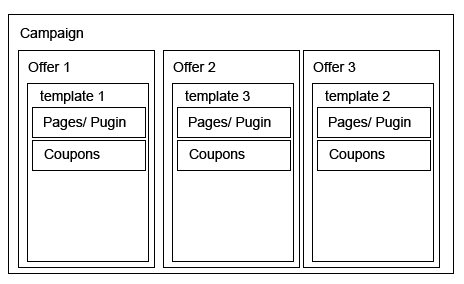
<style>
.page{position:relative;width:464px;height:284px;background:#ffffff}
.page>*{position:absolute;margin:0}
.t1{font:14px "ArialMT";color:#000000}
</style>
<div class="page">
<p class="t1" style="left:20px;top:28px;width:63px;height:13px">Campaign</p>
<p class="t1" style="left:28px;top:62px;width:41px;height:10px">Offer 1</p>
<p class="t1" style="left:173px;top:62px;width:43px;height:10px">Offer 2</p>
<p class="t1" style="left:313px;top:62px;width:43px;height:10px">Offer 3</p>
<p class="t1" style="left:40px;top:90px;width:63px;height:14px">template 1</p>
<p class="t1" style="left:185px;top:90px;width:65px;height:14px">template 3</p>
<p class="t1" style="left:325px;top:90px;width:65px;height:14px">template 2</p>
<p class="t1" style="left:44px;top:117px;width:82px;height:13px">Pages/ Pugin</p>
<p class="t1" style="left:189px;top:117px;width:82px;height:13px">Pages/ Pugin</p>
<p class="t1" style="left:329px;top:117px;width:82px;height:13px">Pages/ Pugin</p>
<p class="t1" style="left:44px;top:149px;width:56px;height:13px">Coupons</p>
<p class="t1" style="left:189px;top:149px;width:56px;height:13px">Coupons</p>
<p class="t1" style="left:329px;top:149px;width:56px;height:13px">Coupons</p>
</div>
